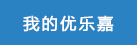
<style>
.page{position:relative;width:137px;height:45px;background:#2a82c2}
.page>*{position:absolute;margin:0}
.t1{font:16px "MicrosoftYaHei";letter-spacing:0.13em;color:#ffffff;font-weight:bold}
</style>
<div class="page">
<p class="t1" style="left:23px;top:15px;width:91px;height:17px">我的优乐嘉</p>
</div>
